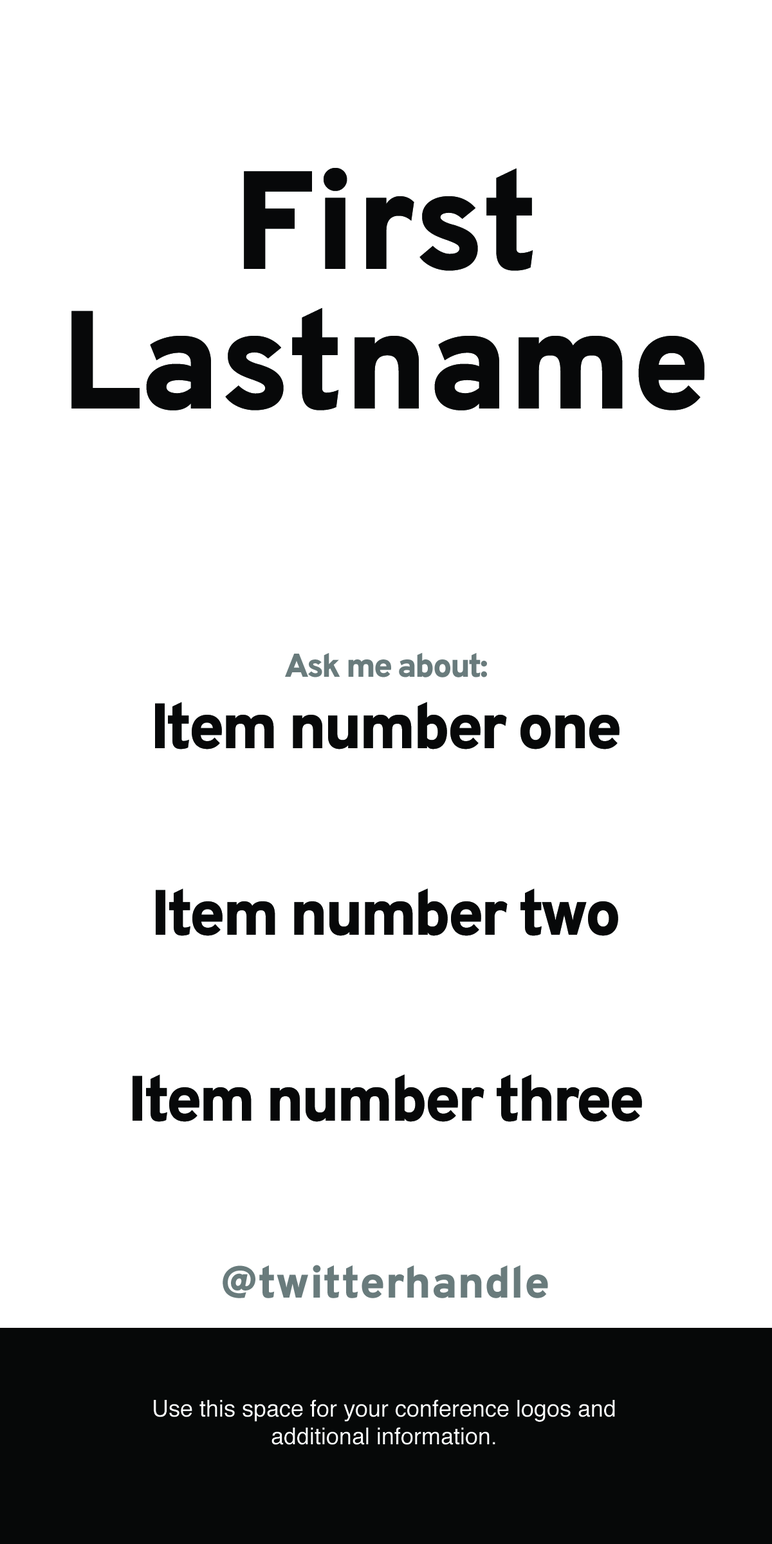
<style>
.page{position:relative;width:772px;height:1544px;background:#ffffff}
.page>*{position:absolute;margin:0}
.t1{font:139.2px/139.2px "Overpass-Heavy";color:#070809}
.t2{font:33.1px "Overpass-Heavy";letter-spacing:-0.05em;color:#687c7c}
.t3{font:63.8px "Overpass-Heavy";letter-spacing:-0.05em;color:#070809}
.t4{font:44.8px "Overpass-Heavy";color:#687c7c}
.t5{font:23.2px "Helvetica";color:#ffffff}
</style>
<div class="page">
<p class="t1" style="left:71px;top:168px;width:634px;height:243px;text-align:center">First<br>Lastname</p>
<p class="t2" style="left:285px;top:652px;width:202px;height:26px">Ask me about:</p>
<p class="t3" style="left:155px;top:702px;width:465px;height:48px">Item number one</p>
<p class="t3" style="left:156px;top:889px;width:462px;height:47px">Item number two</p>
<p class="t3" style="left:133px;top:1075px;width:509px;height:47px">Item number three</p>
<p class="t4" style="left:223px;top:1265px;width:325px;height:33px">@twitterhandle</p>
<p class="t5" style="left:154px;top:1400px;width:461px;height:45px;text-align:center">Use this space for your conference logos and additional information.</p>
</div>
